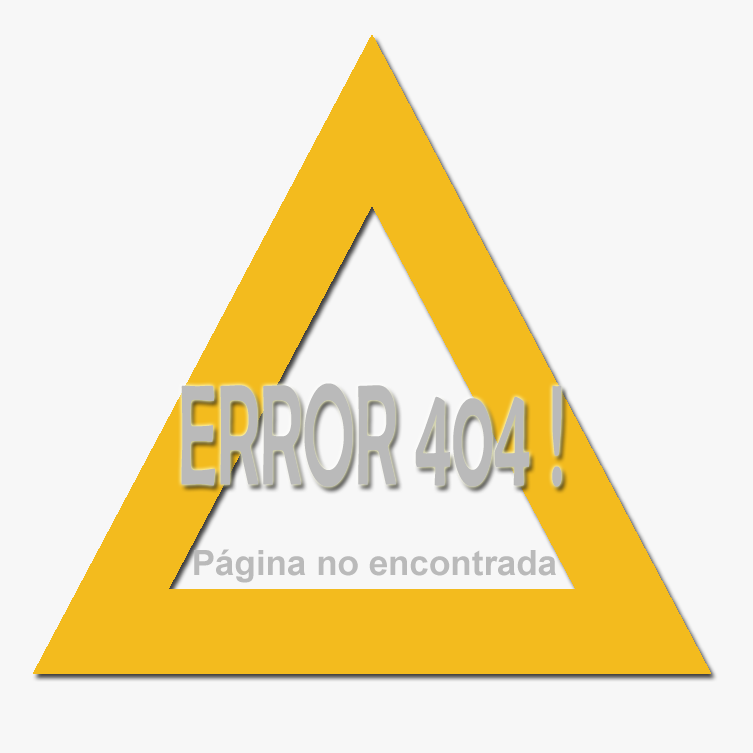
<style>
.page{position:relative;width:753px;height:753px;background:#f7f7f7}
.page>*{position:absolute;margin:0}
.t1{font:144px "BerlinSansFB-Reg";color:#bababa;scale:0.5 1}
.t2{font:35px "Arial-BoldMT";color:#bababa}
</style>
<div class="page">
<p class="t1" style="left:181px;top:383px;width:381px;height:104px">ERROR 404 !</p>
<p class="t2" style="left:194px;top:549px;width:362px;height:34px">Página no encontrada</p>
</div>
